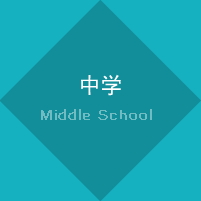
<style>
.page{position:relative;width:201px;height:201px;background:#16b1c1}
.page>*{position:absolute;margin:0}
.t1{font:22px "SimHei";color:#ffffff}
.t2{font:12px "FZZXHJW--GB1-0";letter-spacing:0.1em;color:#71bbc2;font-weight:bold}
</style>
<div class="page">
<p class="t1" style="left:81px;top:74px;width:40px;height:22px">中学</p>
<p class="t2" style="left:41px;top:109px;width:111px;height:11px">Middle School</p>
</div>
